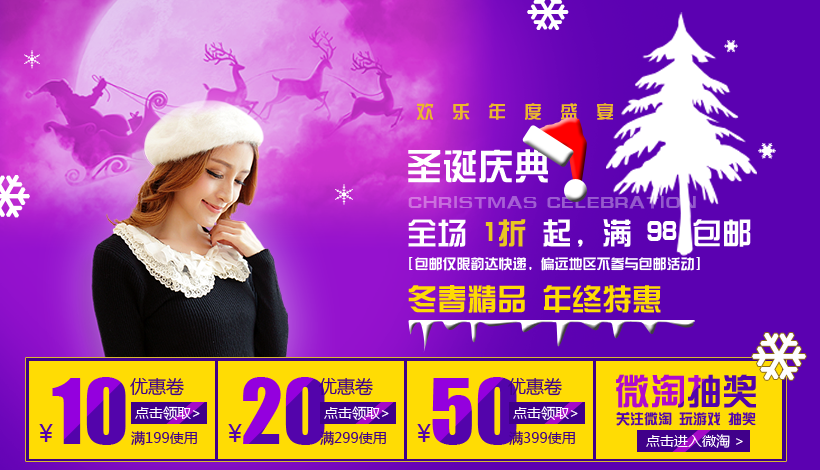
<style>
.page{position:relative;width:820px;height:470px}
.page>*{position:absolute;margin:0}
.t1{font:18px "ç»å¸ç»¼èºä½ç®-regular";color:#ebb72c}
.t2{font:36px "ç»å¸ç»¼èºä½ç®-regular";color:#ffffff}
.t3{font:18px "ç»å¸ç»¼èºä½ç®-regular"}
.t4{font:30px "ç»å¸ç»¼èºä½ç®-regular";color:#ffffff}
.t5{font:30px "ç»å¸ç»¼èºä½ç®-regular";color:#e9c621}
.t6{font:14px "ç»å¸ç»¼èºä½ç®-regular";color:#ffffff}
.t7{font:30px "ç»å¸ç»¼èºä½ç®-regular";color:#fedb03}
.t8{font:83.1px "Impact"}
.t9{font:36px "ç»å¸ç»¼èºä½ç®-regular"}
.t10{font:18px "MicrosoftYaHei";color:#3f008c}
.t11{font:14px "MicrosoftYaHei";color:#ffffff}
.t12{font:14px "ç»å¸ç»¼èºä½ç®-regular";color:#5304ab}
.t13{font:24px "MicrosoftYaHei";color:#5304ab}
.t14{font:14px "MicrosoftYaHei";color:#40008a}
</style>
<div class="page">
<p class="t1" style="left:417px;top:103px;width:196px;height:17px">欢  乐  年  度  盛  宴</p>
<p class="t2" style="left:408px;top:149px;width:140px;height:34px">圣诞庆典</p>
<p class="t3" style="left:408px;top:196px;width:288px;height:13px">CHRISTMAS CELEBRATION</p>
<p class="t4" style="left:408px;top:219px;width:343px;height:28px">全场 <span class="t5">1折</span> 起，满 98 包邮</p>
<p class="t6" style="left:409px;top:257px;width:291px;height:14px">[包邮仅限韵达快递，偏远地区不参与包邮活动]</p>
<p class="t7" style="left:408px;top:285px;width:253px;height:28px">冬春精品 年终特惠</p>
<p class="t8" style="left:52px;top:377px;width:74px;height:68px">10</p>
<p class="t8" style="left:243px;top:377px;width:82px;height:68px">20</p>
<p class="t8" style="left:432px;top:377px;width:85px;height:68px">50</p>
<p class="t9" style="left:616px;top:374px;width:140px;height:34px">微淘抽奖</p>
<p class="t10" style="left:130px;top:378px;width:54px;height:18px">优惠卷</p>
<p class="t10" style="left:319px;top:378px;width:54px;height:18px">优惠卷</p>
<p class="t10" style="left:508px;top:378px;width:54px;height:18px">优惠卷</p>
<p class="t11" style="left:135px;top:406px;width:65px;height:14px">点击领取&gt;</p>
<p class="t11" style="left:324px;top:406px;width:65px;height:14px">点击领取&gt;</p>
<p class="t11" style="left:513px;top:406px;width:65px;height:14px">点击领取&gt;</p>
<p class="t12" style="left:616px;top:412px;width:140px;height:14px">关注微淘 玩游戏 抽奖</p>
<p class="t13" style="left:39px;top:424px;width:14px;height:18px">￥</p>
<p class="t13" style="left:228px;top:424px;width:14px;height:18px">￥</p>
<p class="t13" style="left:417px;top:424px;width:14px;height:18px">￥</p>
<p class="t14" style="left:131px;top:431px;width:66px;height:14px">满199使用</p>
<p class="t14" style="left:320px;top:431px;width:66px;height:14px">满299使用</p>
<p class="t14" style="left:509px;top:431px;width:66px;height:14px">满399使用</p>
<p class="t11" style="left:646px;top:434px;width:97px;height:14px">点击进入微淘 &gt;</p>
</div>
